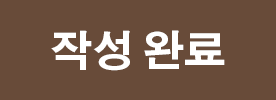
<style>
.page{position:relative;width:276px;height:100px;background:#684b39}
.page>*{position:absolute;margin:0}
.t1{font:41.7px "AdobeGothicStd-Bold";color:#ffffff}
</style>
<div class="page">
<p class="t1" style="left:51px;top:30px;width:174px;height:41px">작성 완료</p>
</div>
